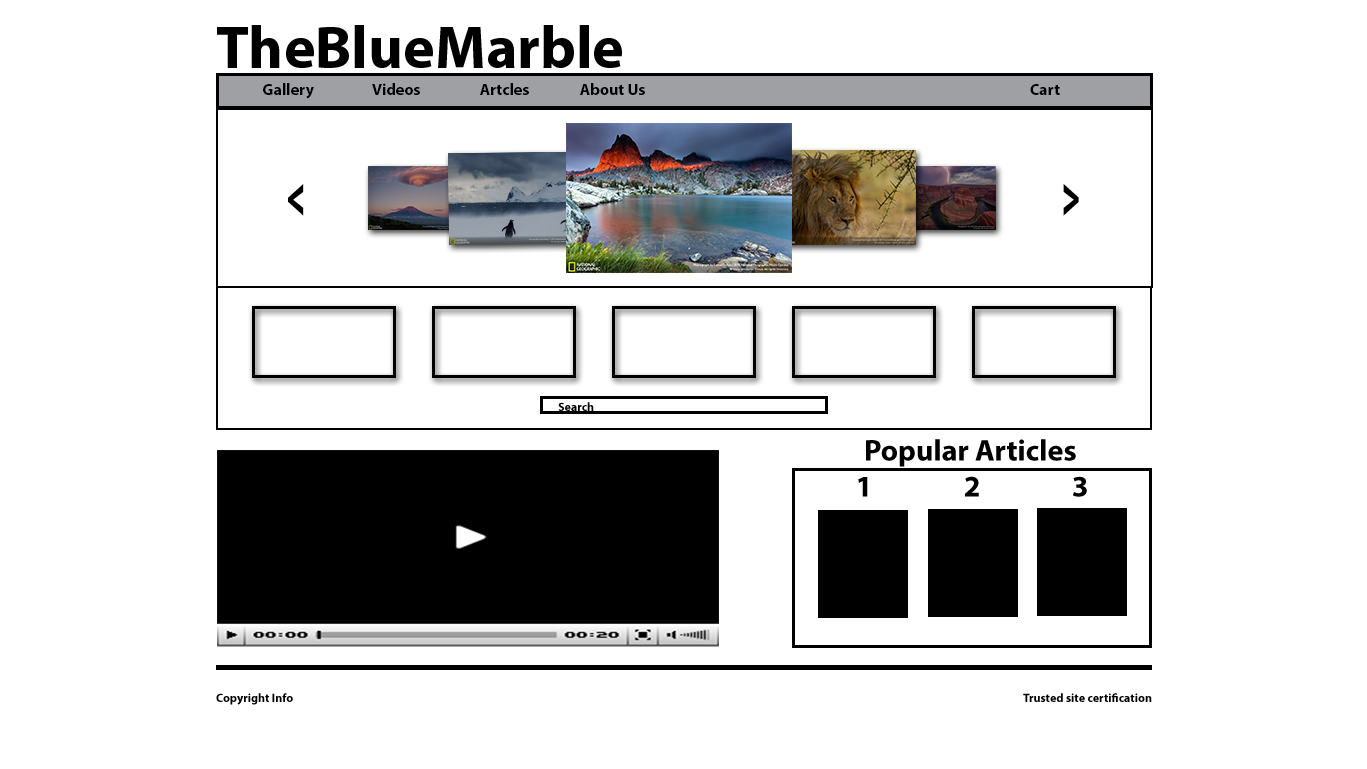
<style>
.page{position:relative;width:1367px;height:769px;background:#ffffff}
.page>*{position:absolute;margin:0}
.t1{font:60.1px "MyriadPro-Bold";color:#000000}
.t2{font:16px "MyriadPro-Bold";color:#000000}
.t3{font:72px "Tandelle-Bold";color:#000000}
.t4{font:12px "MyriadPro-Bold";color:#000000}
.t5{font:30px "MyriadPro-Bold";color:#000000}
</style>
<div class="page">
<p class="t1" style="left:217px;top:25px;width:405px;height:43px">TheBlueMarble</p>
<p class="t2" style="left:263px;top:83px;width:51px;height:16px">Gallery</p>
<p class="t2" style="left:372px;top:83px;width:48px;height:12px">Videos</p>
<p class="t2" style="left:480px;top:83px;width:49px;height:12px">Artcles</p>
<p class="t2" style="left:580px;top:83px;width:65px;height:12px">About Us</p>
<p class="t2" style="left:1030px;top:84px;width:30px;height:11px">Cart</p>
<p class="t3" style="left:288px;top:183px;width:16px;height:33px">&lt;</p>
<p class="t3" style="left:1063px;top:183px;width:16px;height:33px">&gt;</p>
<p class="t4" style="left:558px;top:402px;width:36px;height:9px">Search</p>
<p class="t5" style="left:866px;top:439px;width:210px;height:28px">Popular Articles</p>
<p class="t5" style="left:858px;top:477px;width:10px;height:20px">1</p>
<p class="t5" style="left:965px;top:476px;width:14px;height:21px">2</p>
<p class="t5" style="left:1073px;top:476px;width:14px;height:21px">3</p>
<p class="t4" style="left:216px;top:693px;width:77px;height:12px">Copyright Info</p>
<p class="t4" style="left:1023px;top:693px;width:129px;height:9px">Trusted site certification</p>
</div>
